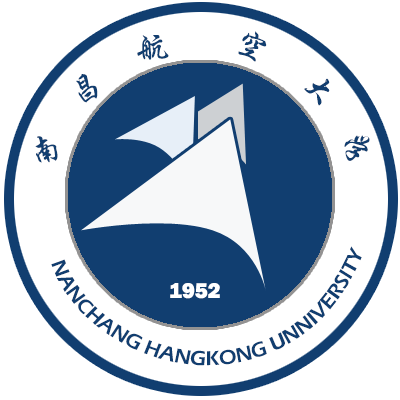
<style>
.page{position:relative;width:400px;height:400px;background:#ffffff}
.page>*{position:absolute;margin:0}
.t1{font:33px "STXingkai";color:#113e70}
.t2{font:22px "FranklinGothic-Heavy";color:#ffffff}
</style>
<div class="page">
<p class="t1" style="left:137px;top:35px;width:32px;height:25px;rotate:-6deg">航</p>
<p class="t1" style="left:238px;top:31px;width:29px;height:31px;rotate:28deg">空</p>
<p class="t1" style="left:76px;top:74px;width:22px;height:29px;rotate:-25deg">昌</p>
<p class="t1" style="left:304px;top:78px;width:26px;height:28px;rotate:45deg">大</p>
<p class="t1" style="left:35px;top:136px;width:23px;height:27px;rotate:-19deg">南</p>
<p class="t1" style="left:344px;top:135px;width:26px;height:26px;rotate:35deg">学</p>
<p class="t2" style="left:170px;top:283px;width:50px;height:16px">1952</p>
</div>
